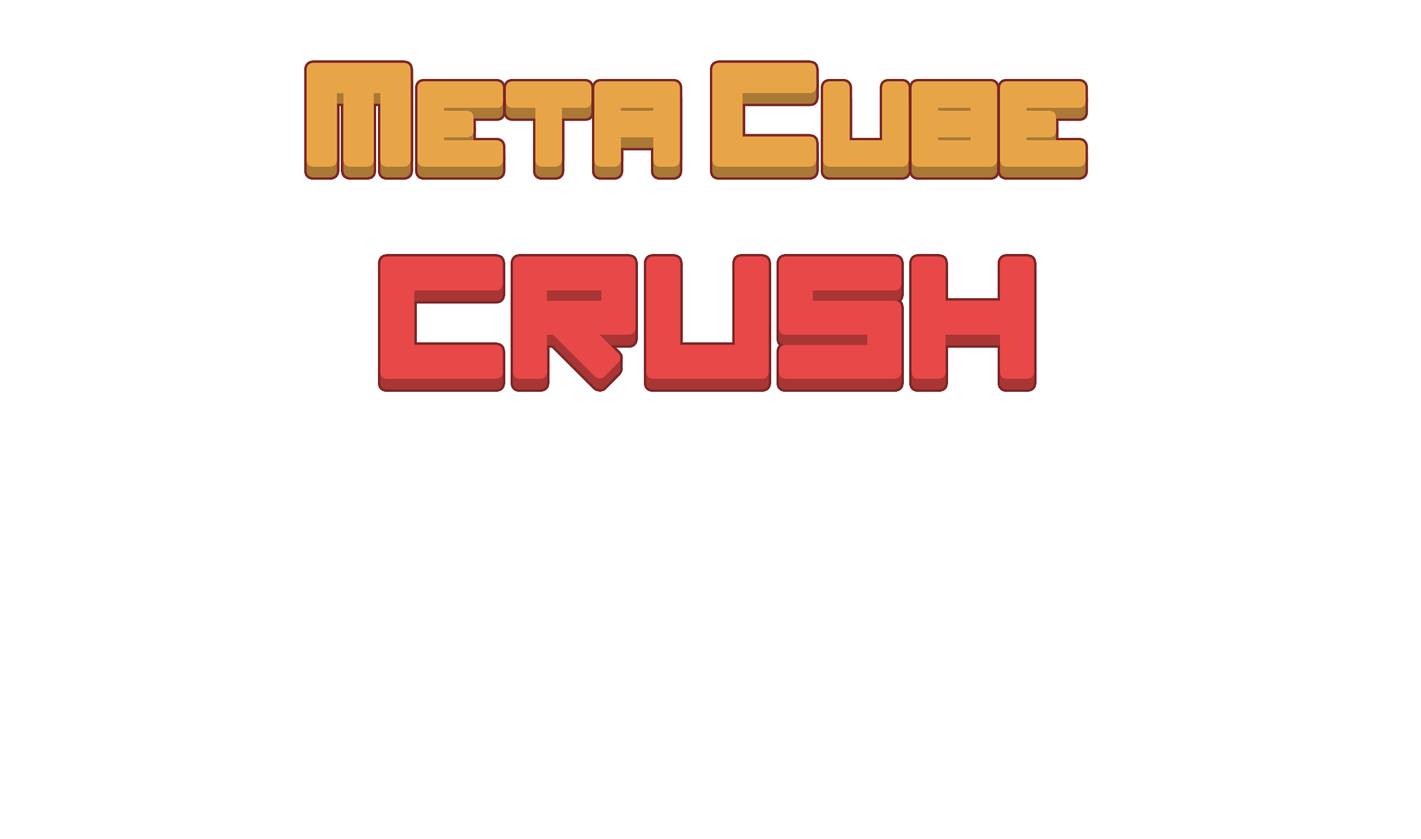
<style>
.page{position:relative;width:1421px;height:839px;background:#ffffff}
.page>*{position:absolute;margin:0}
.t1{font:176.8px "imagine-font"}
.t2{font:147.4px "imagine-font"}
.t3{font:117.9px "imagine-font"}
</style>
<div class="page">
<p class="t1" style="left:312px;top:68px;width:768px;height:305px;text-align:center"><span class="t2">M</span><span class="t3">eta </span><span class="t2">C</span><span class="t3">UBE <br></span>Crush</p>
</div>
